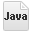
<style>
.page{position:relative;width:32px;height:32px;background:#ffffff}
.page>*{position:absolute;margin:0}
.t1{font:11px "Arial-BoldMT";color:#313131}
</style>
<div class="page">
<p class="t1" style="left:4px;top:12px;width:23px;height:8px">Java</p>
</div>
